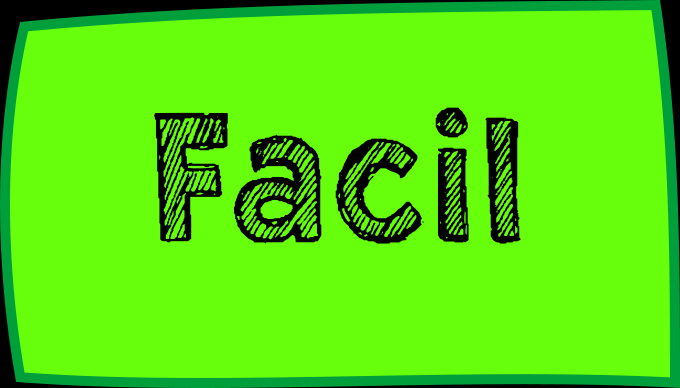
<style>
.page{position:relative;width:680px;height:388px;background:#68ff0d}
.page>*{position:absolute;margin:0}
.t1{font:226px "Chalkboy-Regular";color:#000000}
</style>
<div class="page">
<p class="t1" style="left:153px;top:107px;width:368px;height:137px">Fácil</p>
</div>
